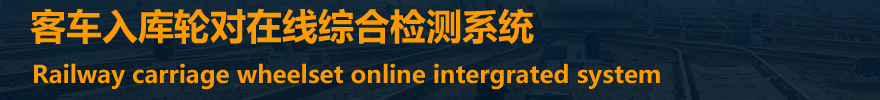
<style>
.page{position:relative;width:880px;height:100px}
.page>*{position:absolute;margin:0}
.t1{font:36px "MicrosoftYaHei-Bold";color:#fc9a01}
.t2{font:24px "MicrosoftYaHei-Bold";color:#fc9a01}
</style>
<div class="page">
<p class="t1" style="left:30px;top:8px;width:504px;height:36px">客车入库轮对在线综合检测系统</p>
<p class="t2" style="left:34px;top:63px;width:626px;height:27px">Railway carriage wheelset online intergrated system</p>
</div>
